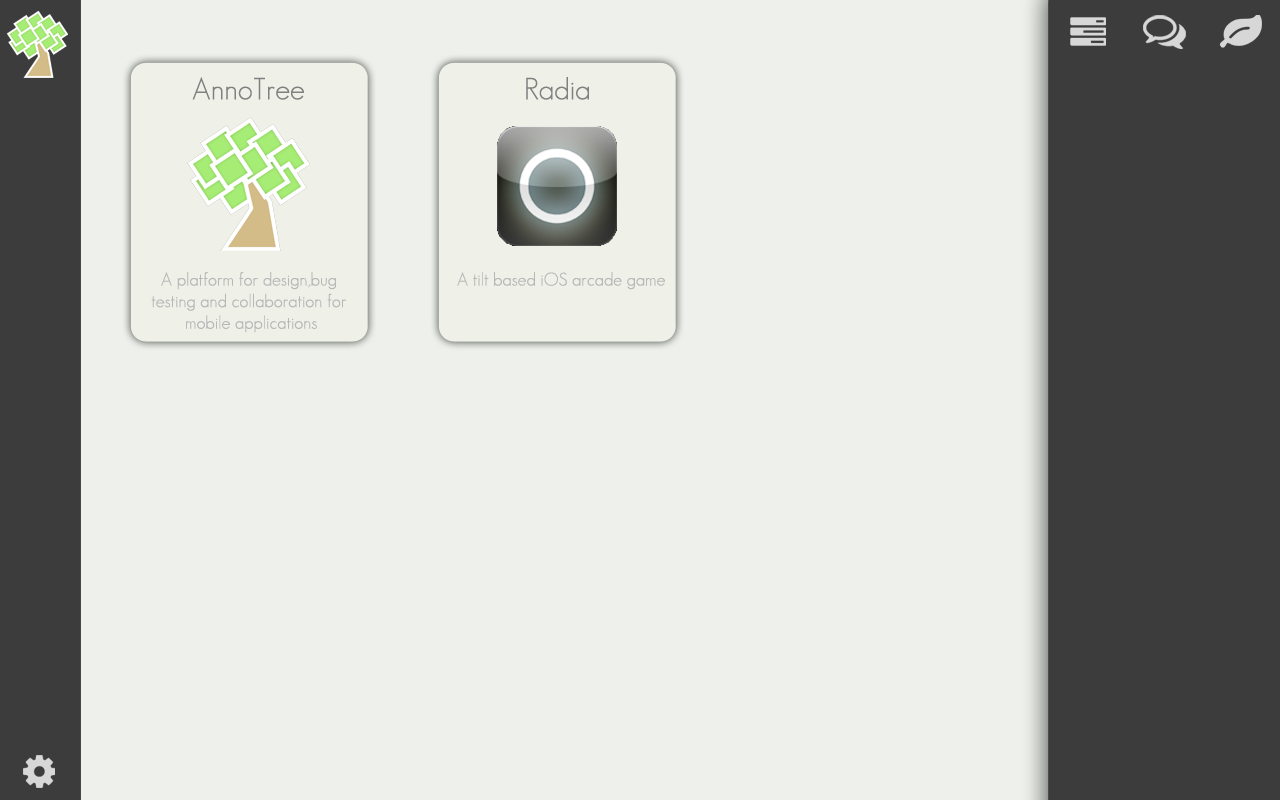
<style>
.page{position:relative;width:1280px;height:800px;background:#eef1eb}
.page>*{position:absolute;margin:0}
.t1{font:30px "GeosansLight";color:#808080}
.t2{font:18px "GeosansLight";color:#b7b7b7}
</style>
<div class="page">
<p class="t1" style="left:192px;top:77px;width:112px;height:23px">AnnoTree</p>
<p class="t1" style="left:526px;top:77px;width:63px;height:23px">Radia</p>
<p class="t2" style="left:151px;top:272px;width:195px;height:61px;text-align:center">A platform for design,bug <br>testing and collaboration for <br>mobile applications</p>
<p class="t2" style="left:457px;top:272px;width:208px;height:18px">A tilt based iOS arcade game</p>
</div>
